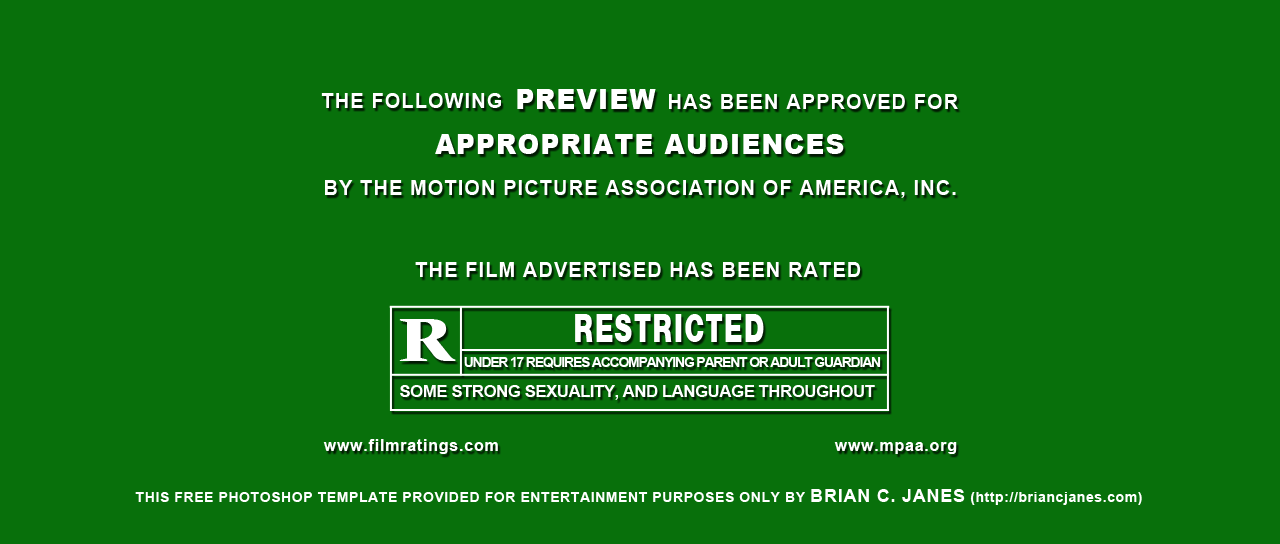
<style>
.page{position:relative;width:1280px;height:544px;background:#08700b}
.page>*{position:absolute;margin:0}
.t1{font:28.4px "Arial-Black";letter-spacing:0.04em;color:#ffffff;scale:0.92 1}
.t2{font:21.4px "Arial-BoldMT";letter-spacing:0.055em;color:#ffffff;scale:0.93 1}
.t3{font:41.1px "NimbusSansNovusTBlack";letter-spacing:0.055em;color:#ffffff;scale:0.68 1}
.t4{font:66.6px "VeljovicStd-Black";letter-spacing:0.055em;color:#ffffff}
.t5{font:14.5px "Arial-BoldMT";letter-spacing:-0.078em;color:#ffffff;scale:0.95 1}
.t6{font:17.1px "Arial-BoldMT";letter-spacing:-0.04em;color:#ffffff}
.t7{font:16.7px "Arial-BoldMT";letter-spacing:0.055em;color:#ffffff;scale:0.95 1}
.t8{font:14px "Arial-BoldMT";letter-spacing:0.042em;color:#ffffff}
.t9{font:18px "Arial-BoldMT";letter-spacing:0.042em;color:#ffffff}
</style>
<div class="page">
<p class="t1" style="left:517px;top:89px;width:139px;height:20px">PREVIEW</p>
<p class="t2" style="left:321px;top:93px;width:180px;height:15px">THE FOLLOWING</p>
<p class="t2" style="left:669px;top:94px;width:289px;height:15px">HAS BEEN APPROVED FOR</p>
<p class="t1" style="left:435px;top:134px;width:409px;height:20px">APPROPRIATE AUDIENCES</p>
<p class="t2" style="left:325px;top:180px;width:631px;height:18px">BY THE MOTION PICTURE ASSOCIATION OF AMERICA, INC.</p>
<p class="t2" style="left:415px;top:262px;width:446px;height:15px">THE FILM ADVERTISED HAS BEEN RATED</p>
<p class="t3" style="left:575px;top:314px;width:189px;height:28px">RESTRICTED</p>
<p class="t4" style="left:399px;top:319px;width:57px;height:42px">R</p>
<p class="t5" style="left:464px;top:357px;width:417px;height:11px">UNDER 17 REQUIRES ACCOMPANYING PARENT OR ADULT GUARDIAN</p>
<p class="t6" style="left:400px;top:385px;width:475px;height:15px">SOME STRONG SEXUALITY, AND LANGUAGE THROUGHOUT</p>
<p class="t7" style="left:323px;top:439px;width:175px;height:15px">www.filmratings.com</p>
<p class="t7" style="left:834px;top:442px;width:123px;height:12px">www.mpaa.org</p>
<p class="t8" style="left:135px;top:489px;width:1007px;height:16px">THIS FREE PHOTOSHOP TEMPLATE PROVIDED FOR ENTERTAINMENT PURPOSES ONLY BY <span class="t9">BRIAN C. JANES</span> (http://briancjanes.com)</p>
</div>
